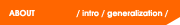
<style>
.page{position:relative;width:180px;height:25px;background:#ff6600}
.page>*{position:absolute;margin:0}
.t1{font:8px "Atlanta-Demi";color:#ffffff}
</style>
<div class="page">
<p class="t1" style="left:9px;top:9px;width:26px;height:8px">ABOUT</p>
<p class="t1" style="left:76px;top:10px;width:93px;height:8px">/ intro / generalization /</p>
</div>
